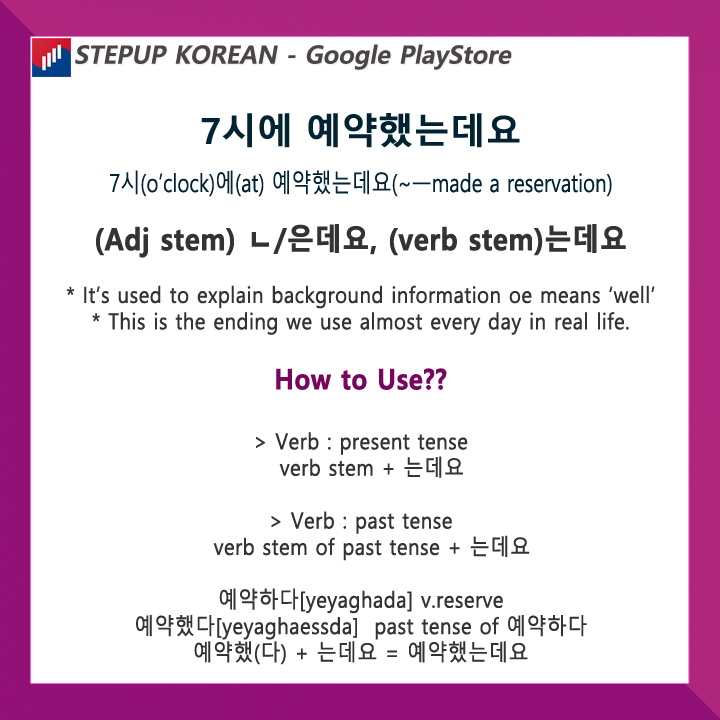
<style>
.page{position:relative;width:720px;height:720px;background:#ffffff}
.page>*{position:absolute;margin:0}
.t1{font:25px "MalgunGothicBold";color:#4a4646;font-style:italic}
.t2{font:25px/48px "MalgunGothic";color:#022332;scale:0.8 1}
.t3{font:36px/48px "MalgunGothicBold";color:#022332}
.t4{font:22px "MalgunGothic";color:#333333;font-weight:bold;scale:0.9 1}
.t5{font:30px "MalgunGothicBold";color:#333333;font-weight:bold;scale:0.9 1}
.t6{font:28px "MalgunGothicBold";color:#78065f;font-weight:bold;scale:0.9 1}
</style>
<div class="page">
<p class="t1" style="left:75px;top:44px;width:437px;height:26px">STEPUP KOREAN - Google PlayStore</p>
<p class="t2" style="left:110px;top:113px;width:502px;height:84px;text-align:center"><span class="t3">7시에 예약했는데요<br></span>7시(o’clock)에(at) 예약했는데요(~ㅡmade a reservation)</p>
<p class="t4" style="left:66px;top:224px;width:589px;height:441px;text-align:center"><span class="t5">(Adj stem) ㄴ/은데요, (verb stem)는데요<br><br></span>* It’s used to explain background information oe means ‘well’<br>* This is the ending we use almost every day in real life.<br><br><span class="t6">How to Use??<br><br></span>&gt; Verb : present tense<br>   verb stem + 는데요<br><br>&gt; Verb : past tense<br>   verb stem of past tense + 는데요<br><br>예약하다[yeyaghada] v.reserve<br>예약했다[yeyaghaessda]  past tense of 예약하다<br>예약했(다) + 는데요 = 예약했는데요</p>
</div>
